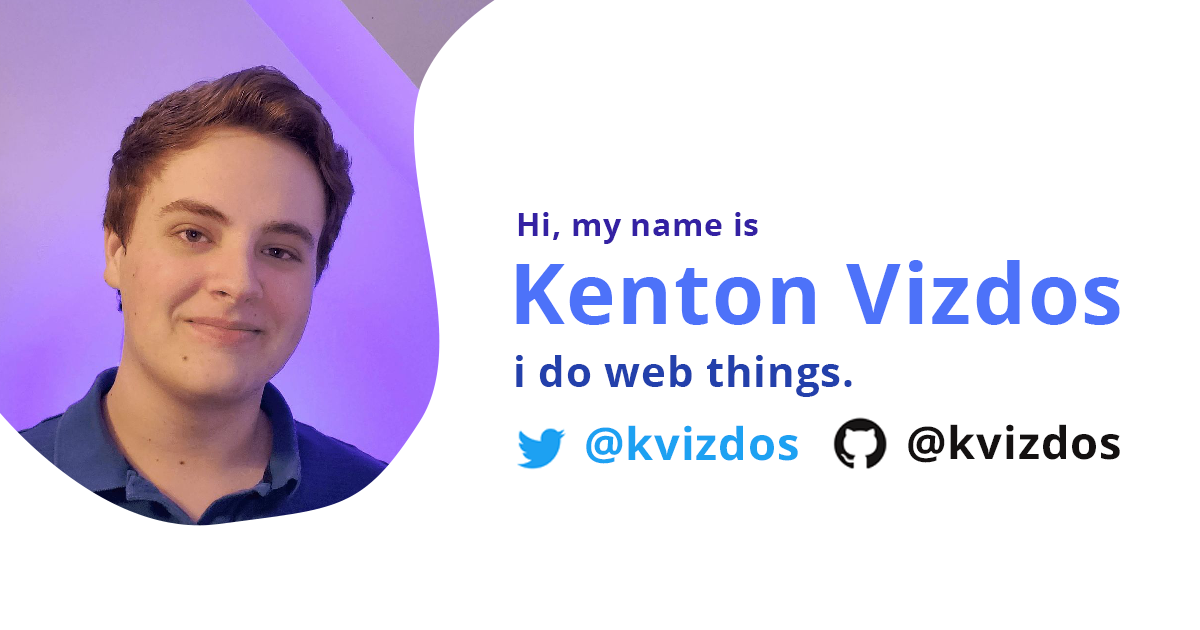
<style>
.page{position:relative;width:1200px;height:630px;background:#ffffff}
.page>*{position:absolute;margin:0}
.t1{font:32px "OpenSans-Bold";letter-spacing:0.02em;color:#3421a3}
.t2{font:84px "OpenSans-Bold";letter-spacing:0.02em;color:#4d72f9}
.t3{font:42px "OpenSans-Bold";letter-spacing:0.02em;color:#2340ab}
.t4{font:45.1px "OpenSans-Bold";letter-spacing:0.02em;color:#1da1f2}
.t5{font:45.1px "OpenSans-Bold";letter-spacing:0.02em;color:#141111}
</style>
<div class="page">
<p class="t1" style="left:518px;top:212px;width:240px;height:32px">Hi, my name is</p>
<p class="t2" style="left:516px;top:260px;width:604px;height:65px">Kenton Vizdos</p>
<p class="t3" style="left:516px;top:355px;width:336px;height:42px">i do web things.</p>
<p class="t4" style="left:586px;top:425px;width:212px;height:39px">@kvizdos</p>
<p class="t5" style="left:908px;top:424px;width:212px;height:39px">@kvizdos</p>
</div>
